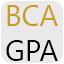
<style>
.page{position:relative;width:64px;height:64px;background:#e9e9e9}
.page>*{position:absolute;margin:0}
.t1{font:29.2px "SegoeUI";color:#ca9a24}
.t2{font:29.2px "SegoeUI";color:#000000}
</style>
<div class="page">
<p class="t1" style="left:6px;top:5px;width:52px;height:56px;text-align:center">BCA<br><span class="t2">GPA</span></p>
</div>
